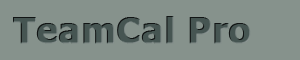
<style>
.page{position:relative;width:300px;height:60px;background:#86928c}
.page>*{position:absolute;margin:0}
.t1{font:36px "Tahoma-Bold";color:#465552;font-weight:bold}
</style>
<div class="page">
<p class="t1" style="left:13px;top:16px;width:238px;height:28px">TeamCal Pro</p>
</div>
